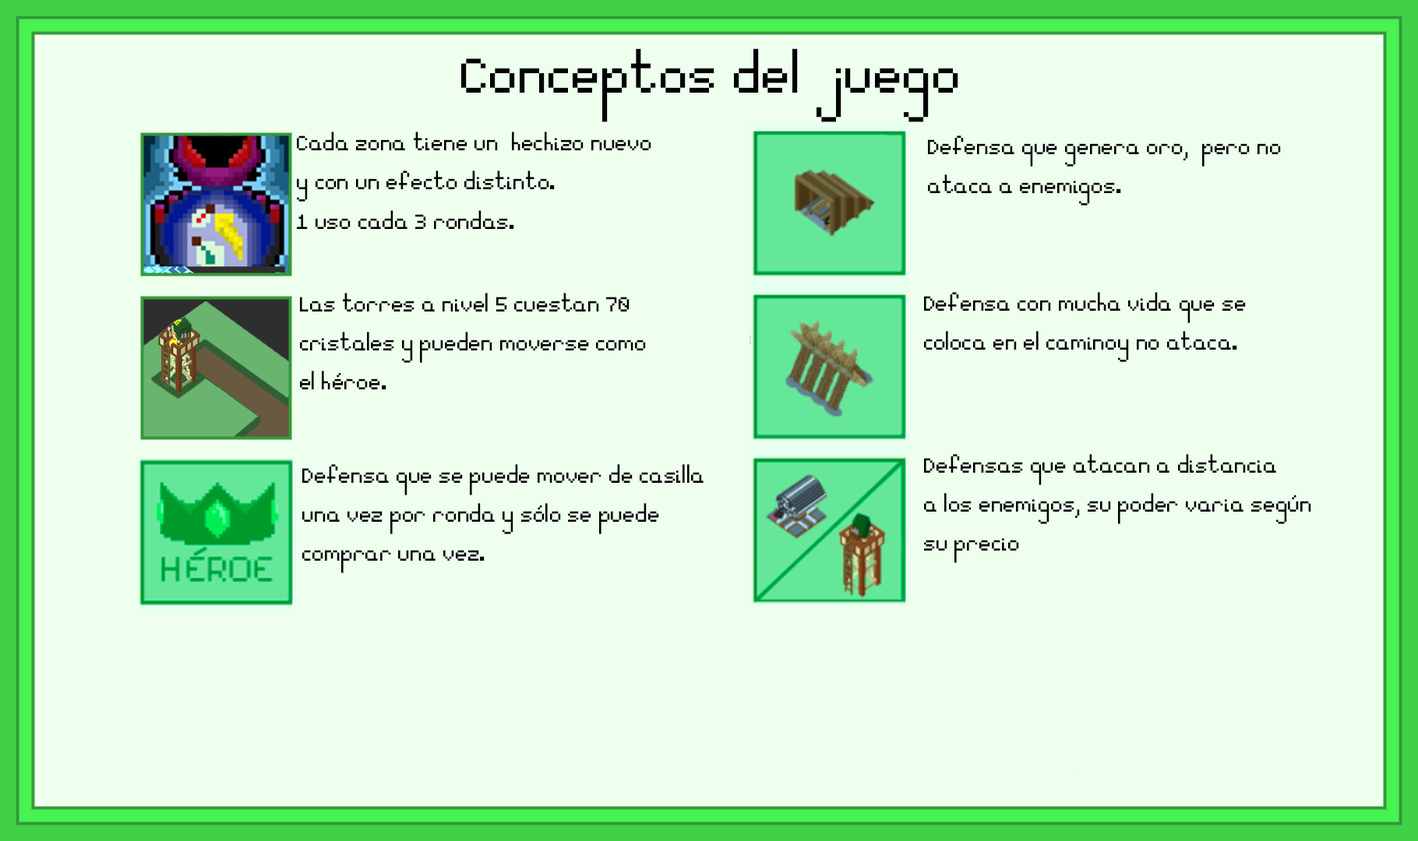
<style>
.page{position:relative;width:1418px;height:841px;background:#eeffee}
.page>*{position:absolute;margin:0}
.t1{font:77.9px "Essential";color:#000000}
.t2{font:32.7px "Essential";color:#000000}
</style>
<div class="page">
<p class="t1" style="left:461px;top:48px;width:497px;height:74px">Conceptos del juego</p>
<p class="t2" style="left:297px;top:132px;width:354px;height:97px">Cada zona tiene un  hechizo nuevo <br>y con un efecto distinto.<br>1 uso cada 3 rondas.</p>
<p class="t2" style="left:928px;top:136px;width:352px;height:70px">Defensa que genera oro,  pero no <br>ataca a enemigos.</p>
<p class="t2" style="left:300px;top:293px;width:346px;height:96px">Las torres a nivel 5 cuestan 70 <br>cristales y pueden moverse como <br>el héroe.</p>
<p class="t2" style="left:924px;top:292px;width:321px;height:70px">Defensa con mucha vida que se <br>coloca en el caminoy no ataca.</p>
<p class="t2" style="left:924px;top:454px;width:387px;height:109px">Defensas que atacan a distancia <br>a los enemigos, su poder varia según <br>su precio</p>
<p class="t2" style="left:302px;top:464px;width:401px;height:109px">Defensa que se puede mover de casilla <br>una vez por ronda y sólo se puede <br>comprar una vez.</p>
</div>
